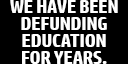
<style>
.page{position:relative;width:128px;height:64px;background:#000000}
.page>*{position:absolute;margin:0}
.t1{font:17.9px/16.7px "HPSimplified-Bold";letter-spacing:-0.01em;color:#ffffff}
</style>
<div class="page">
<p class="t1" style="left:10px;top:0px;width:108px;height:64px;text-align:center">WE HAVE BEEN<br>DEFUNDING<br>EDUCATION<br>FOR YEARS.</p>
</div>
